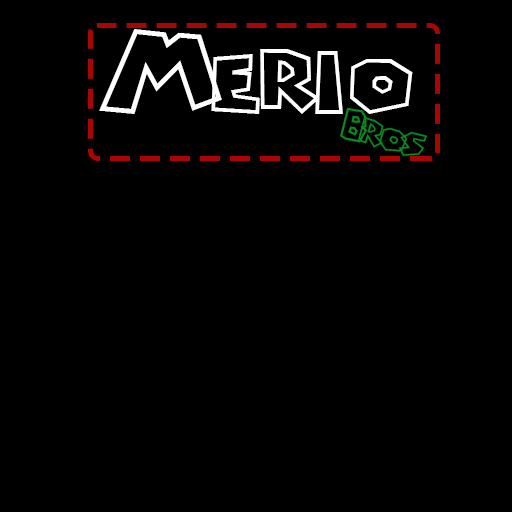
<style>
.page{position:relative;width:512px;height:512px;background:#000000}
.page>*{position:absolute;margin:0}
.t1{font:100px "Chlorinap-Regular";letter-spacing:0.1em;color:#ffffff}
.t2{font:41.7px "Chlorinap-Regular";color:#098b1f}
</style>
<div class="page">
<p class="t1" style="left:99px;top:29px;width:314px;height:85px">Merio</p>
<p class="t2" style="left:340px;top:107px;width:87px;height:49px;rotate:15deg">Bros</p>
</div>
